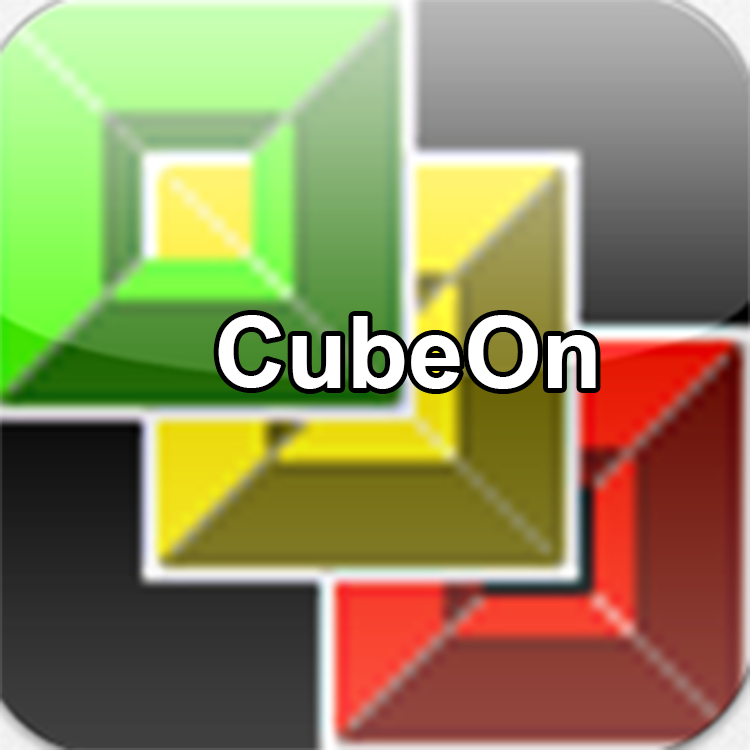
<style>
.page{position:relative;width:750px;height:750px}
.page>*{position:absolute;margin:0}
.t1{font:100px "Arial-BoldMT";color:#ffffff}
</style>
<div class="page">
<p class="t1" style="left:218px;top:315px;width:378px;height:74px">CubeOn</p>
</div>
